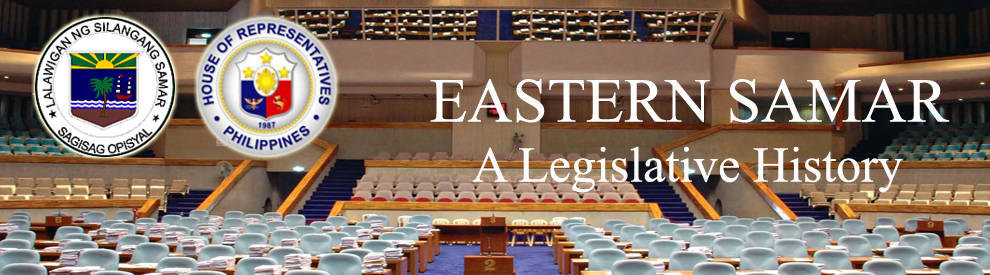
<style>
.page{position:relative;width:990px;height:275px}
.page>*{position:absolute;margin:0}
.t1{font:50px "TimesNewRomanPSMT";color:#fdfcfc}
.t2{font:62.5px "TimesNewRomanPSMT";color:#fdfdfd}
</style>
<div class="page">
<p class="t1" style="left:430px;top:79px;width:520px;height:114px;text-align:center"><span class="t2">EASTERN SAMAR<br></span>A Legislative History</p>
</div>
